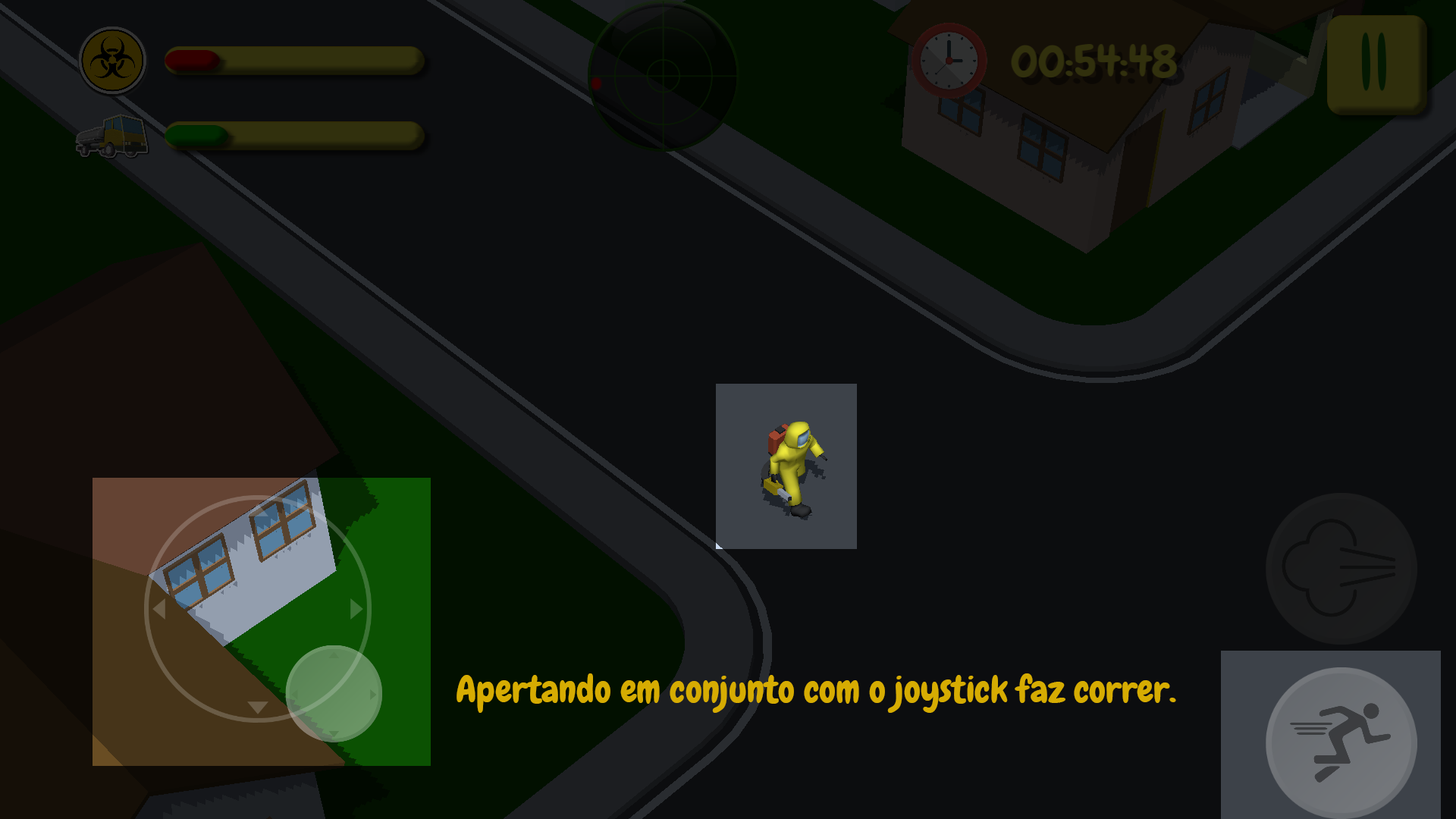
<style>
.page{position:relative;width:1456px;height:819px;background:#0c0d0f}
.page>*{position:absolute;margin:0}
.t1{font:37.1px "Chewy-Regular";color:#d6ac02}
</style>
<div class="page">
<p class="t1" style="left:457px;top:673px;width:719px;height:40px">Apertando em conjunto com o joystick faz correr.</p>
</div>
